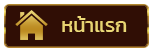
<style>
.page{position:relative;width:153px;height:52px;background:#300e05}
.page>*{position:absolute;margin:0}
.t1{font:20px "Kanit-Regular";color:#e9d472}
</style>
<div class="page">
<p class="t1" style="left:62px;top:16px;width:65px;height:16px">หน้าแรก</p>
</div>
